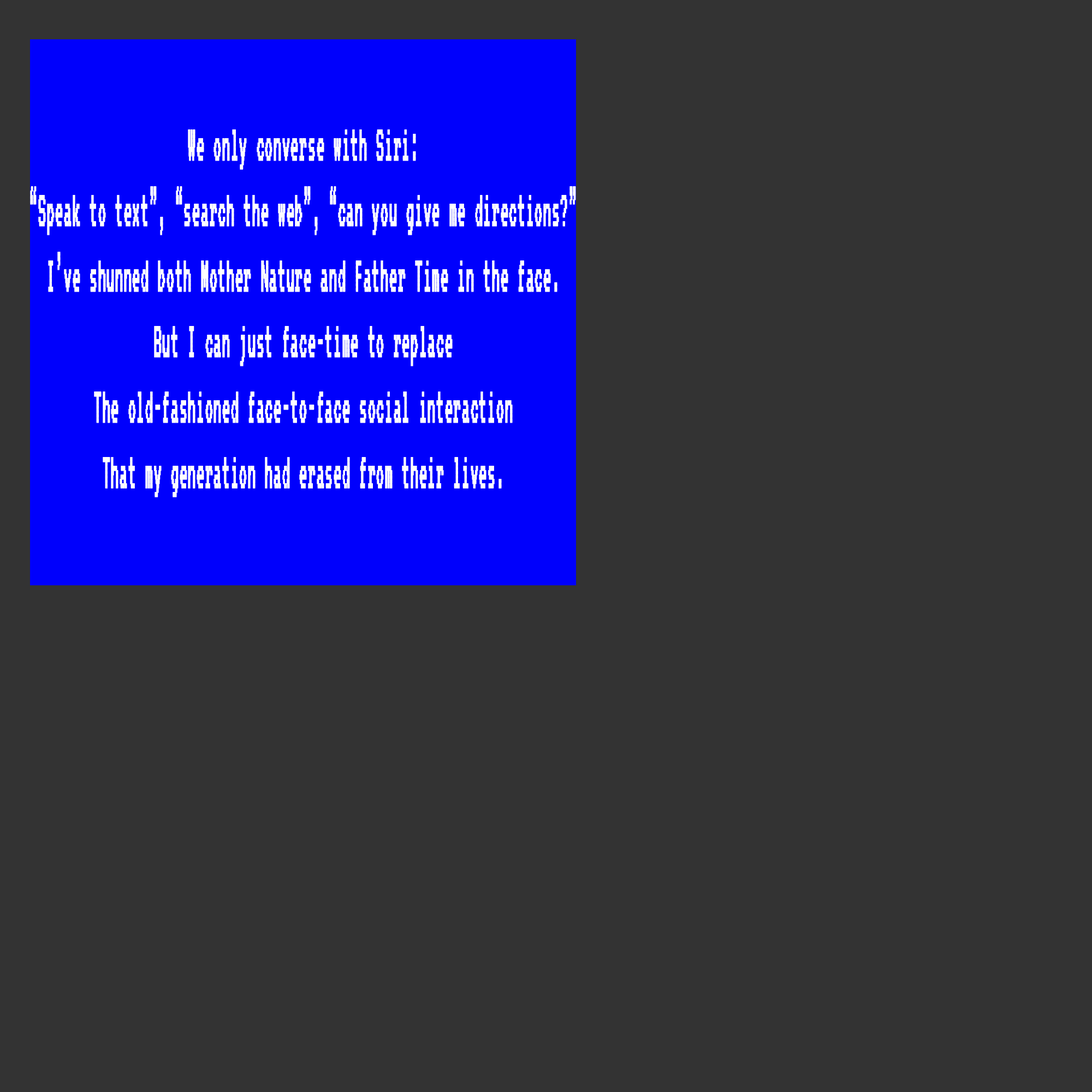
<style>
.page{position:relative;width:1092px;height:1092px;background:#333333}
.page>*{position:absolute;margin:0}
.t1{font:54.6px "VT323-Regular";color:#ffffff;font-weight:bold;scale:0.37 1}
</style>
<div class="page">
<p class="t1" style="left:30px;top:129px;width:546px;height:368px;text-align:center">We only converse with Siri:<br>“Speak to text”, “search the web”, “can you give me directions?”<br>I’ve shunned both Mother Nature and Father Time in the face.<br>But I can just face-time to replace<br>The old-fashioned face-to-face social interaction<br>That my generation had erased from their lives.</p>
</div>
